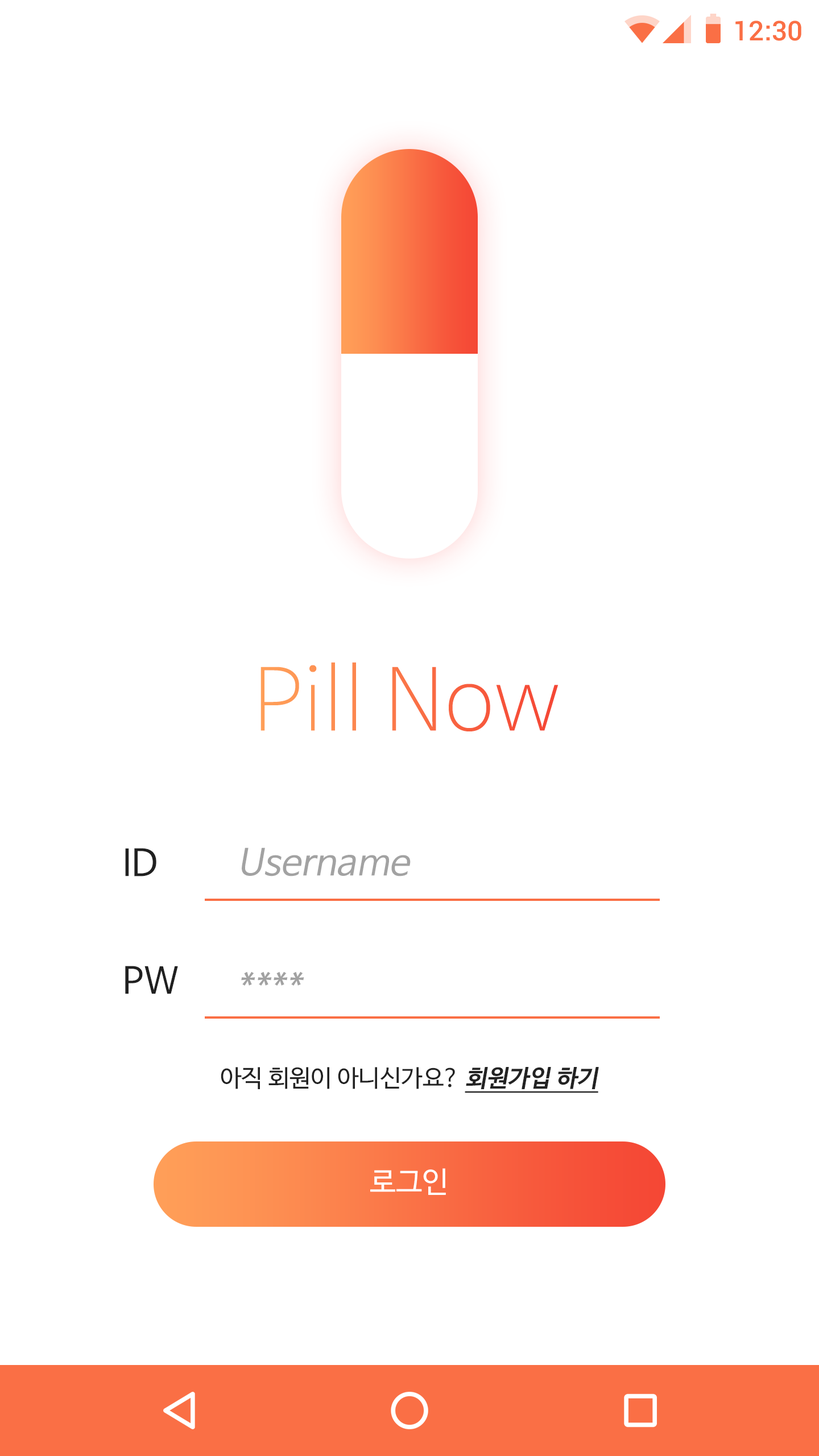
<style>
.page{position:relative;width:819px;height:1456px;background:#ffffff}
.page>*{position:absolute;margin:0}
.t1{font:27.3px "Roboto-Medium";color:#fa6f45}
.t2{font:85.3px "NanumBarunGothicUltraLight"}
.t3{font:36.4px "NanumBarunGothic";color:#202020}
.t4{font:36.4px "NanumBarunGothic";color:#a2a2a2;font-style:italic}
.t5{font:23.9px "NanumBarunGothic";color:#222222}
.t6{font:23.9px "NanumBarunGothicBold";color:#222222;font-style:italic;text-decoration:underline}
.t7{font:29.6px "NanumBarunGothic";color:#ffffff}
</style>
<div class="page">
<p class="t1" style="left:735px;top:20px;width:66px;height:21px">12:30</p>
<p class="t2" style="left:260px;top:662px;width:299px;height:69px">Pill Now</p>
<p class="t3" style="left:125px;top:848px;width:31px;height:28px">ID</p>
<p class="t4" style="left:242px;top:847px;width:169px;height:29px">Username</p>
<p class="t3" style="left:125px;top:966px;width:53px;height:28px">PW</p>
<p class="t4" style="left:241px;top:971px;width:63px;height:15px">****</p>
<p class="t5" style="left:221px;top:1067px;width:378px;height:26px">아직 회원이 아니신가요? <span class="t6">회원가입 하기</span></p>
<p class="t7" style="left:370px;top:1168px;width:76px;height:27px">로그인</p>
</div>
